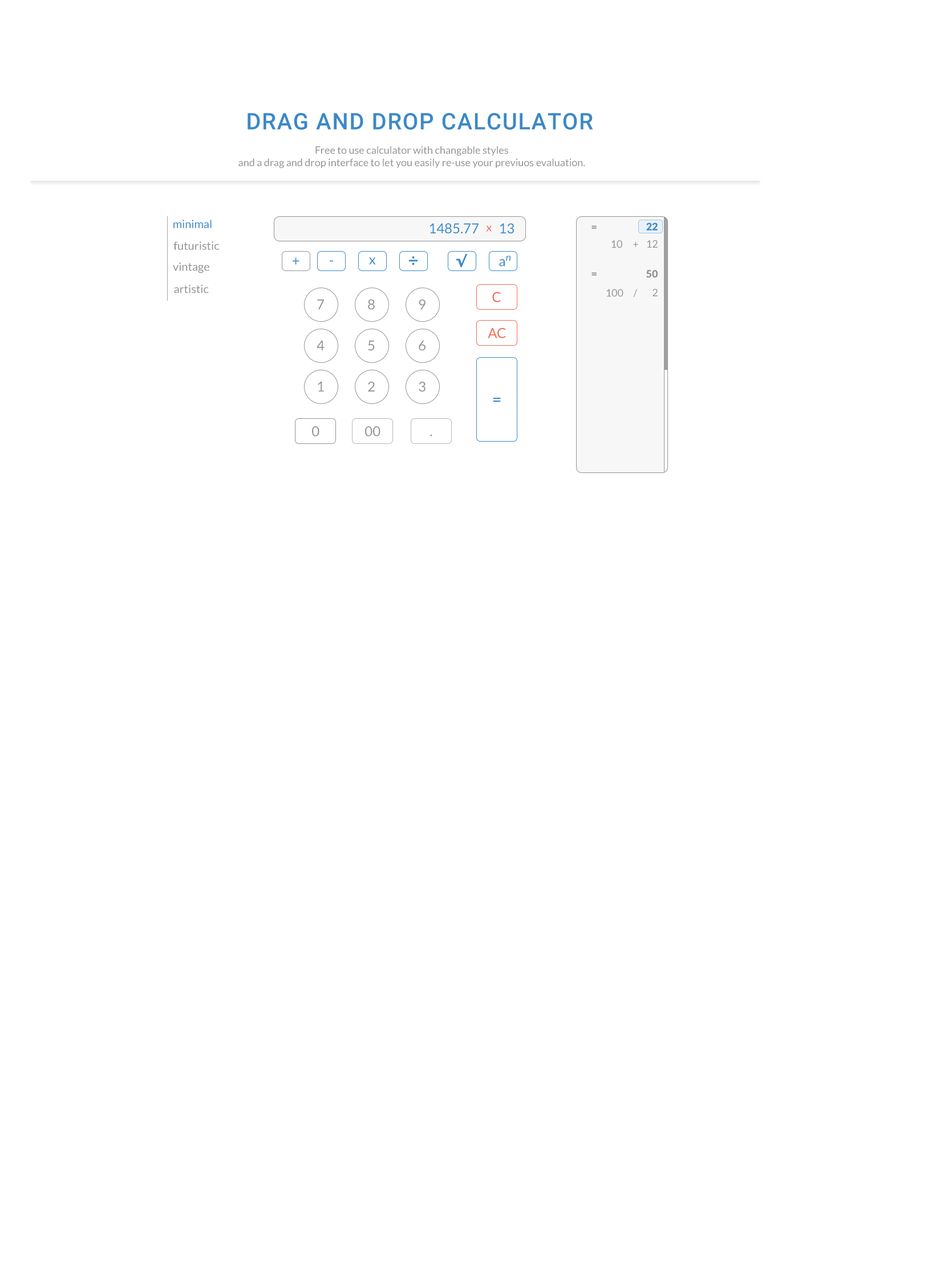
<style>
.page{position:relative;width:940px;height:1269px;background:#ffffff}
.page>*{position:absolute;margin:0}
.t1{font:22.8px "Roboto-Medium";letter-spacing:0.04em;color:#3a89c9;text-transform:uppercase}
.t2{font:10.3px "Lato-Regular";color:#949494}
.t3{font:11.4px "Lato-Regular";color:#3a89c9}
.t4{font:13.7px "Lato-Regular";color:#3a89c9}
.t5{font:11.4px "Lato-Regular";color:#f26c4f}
.t6{font:10.3px "Lato-Black";color:#949494}
.t7{font:10.3px "Lato-Black";color:#3a89c9}
.t8{font:11.4px "Lato-Regular";color:#949494}
.t9{font:13.7px "Tahoma-Bold";color:#3a89c9}
.t10{font:10.3px "Lato-Italic";color:#3a89c9}
.t11{font:13.7px "Lato-Regular";color:#f26c4f}
.t12{font:13.7px "Lato-Regular";color:#949494}
.t13{font:17.1px "Lato-Regular";color:#3a89c9}
</style>
<div class="page">
<p class="t1" style="left:248px;top:113px;width:345px;height:17px">Drag and Drop Calculator</p>
<p class="t2" style="left:238px;top:146px;width:347px;height:22px;text-align:center">Free to use calculator with changable styles <br>and a drag and drop interface to let you easily re-use your previuos evaluation.</p>
<p class="t3" style="left:173px;top:220px;width:39px;height:8px">minimal</p>
<p class="t4" style="left:430px;top:223px;width:49px;height:10px">1485.77</p>
<p class="t5" style="left:486px;top:225px;width:6px;height:7px">x</p>
<p class="t4" style="left:500px;top:223px;width:14px;height:10px">13</p>
<p class="t6" style="left:591px;top:225px;width:6px;height:4px">=</p>
<p class="t7" style="left:646px;top:222px;width:12px;height:8px">22</p>
<p class="t8" style="left:173px;top:241px;width:47px;height:9px">futuristic</p>
<p class="t2" style="left:611px;top:240px;width:11px;height:8px">10</p>
<p class="t2" style="left:633px;top:241px;width:5px;height:6px">+</p>
<p class="t2" style="left:647px;top:240px;width:11px;height:8px">12</p>
<p class="t4" style="left:293px;top:257px;width:6px;height:8px">+</p>
<p class="t4" style="left:369px;top:257px;width:7px;height:8px">x</p>
<p class="t9" style="left:409px;top:256px;width:9px;height:9px">÷</p>
<p class="t9" style="left:456px;top:254px;width:12px;height:14px">√</p>
<p class="t10" style="left:506px;top:256px;width:4px;height:5px">n</p>
<p class="t8" style="left:173px;top:262px;width:36px;height:11px">vintage</p>
<p class="t4" style="left:330px;top:260px;width:3px;height:2px">-</p>
<p class="t4" style="left:499px;top:259px;width:6px;height:7px">a</p>
<p class="t6" style="left:646px;top:270px;width:12px;height:8px">50</p>
<p class="t6" style="left:591px;top:272px;width:6px;height:3px">=</p>
<p class="t8" style="left:174px;top:285px;width:35px;height:8px">artistic</p>
<p class="t11" style="left:492px;top:291px;width:9px;height:11px">C</p>
<p class="t2" style="left:606px;top:289px;width:17px;height:8px">100</p>
<p class="t2" style="left:633px;top:289px;width:5px;height:8px">/</p>
<p class="t2" style="left:653px;top:289px;width:5px;height:8px">2</p>
<p class="t12" style="left:317px;top:299px;width:7px;height:11px">7</p>
<p class="t12" style="left:368px;top:299px;width:7px;height:11px">8</p>
<p class="t12" style="left:419px;top:299px;width:7px;height:11px">9</p>
<p class="t11" style="left:488px;top:327px;width:18px;height:11px">AC</p>
<p class="t12" style="left:317px;top:340px;width:8px;height:11px">4</p>
<p class="t12" style="left:368px;top:340px;width:7px;height:11px">5</p>
<p class="t12" style="left:419px;top:340px;width:7px;height:11px">6</p>
<p class="t12" style="left:318px;top:381px;width:6px;height:11px">1</p>
<p class="t12" style="left:368px;top:381px;width:7px;height:11px">2</p>
<p class="t12" style="left:419px;top:381px;width:7px;height:11px">3</p>
<p class="t13" style="left:493px;top:398px;width:8px;height:4px">=</p>
<p class="t12" style="left:312px;top:426px;width:7px;height:10px">0</p>
<p class="t12" style="left:365px;top:426px;width:15px;height:10px">00</p>
<p class="t12" style="left:430px;top:434px;width:2px;height:2px">.</p>
</div>
